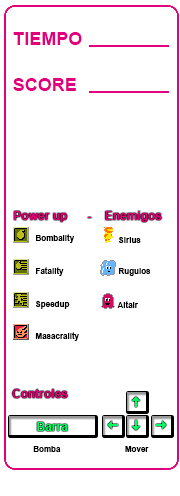
<style>
.page{position:relative;width:180px;height:496px;background:#ffffff}
.page>*{position:absolute;margin:0}
.t1{font:18px "Arial-BoldMT";color:#e3007b}
.t2{font:12px "Arial-BoldMT";color:#e3007b}
.t3{font:8px "Arial-BoldMT";color:#000000}
.t4{font:12px "Arial-BoldMT";color:#00ff66}
</style>
<div class="page">
<p class="t1" style="left:13px;top:32px;width:69px;height:13px">TIEMPO</p>
<p class="t1" style="left:13px;top:78px;width:63px;height:13px">SCORE</p>
<p class="t2" style="left:14px;top:211px;width:148px;height:11px">Power up      -    Enemigos</p>
<p class="t3" style="left:36px;top:234px;width:39px;height:9px">Bombality</p>
<p class="t3" style="left:118px;top:237px;width:23px;height:6px">Sirius</p>
<p class="t3" style="left:36px;top:267px;width:28px;height:9px">Fatality</p>
<p class="t3" style="left:119px;top:268px;width:32px;height:8px">Rugulos</p>
<p class="t3" style="left:35px;top:301px;width:35px;height:8px">Speedup</p>
<p class="t3" style="left:117px;top:301px;width:21px;height:7px">Altair</p>
<p class="t3" style="left:35px;top:332px;width:44px;height:9px">Masacrality</p>
<p class="t2" style="left:12px;top:389px;width:56px;height:9px">Controles</p>
<p class="t4" style="left:37px;top:422px;width:31px;height:9px">Barra</p>
<p class="t3" style="left:33px;top:446px;width:116px;height:6px">Bomba                             Mover</p>
</div>
